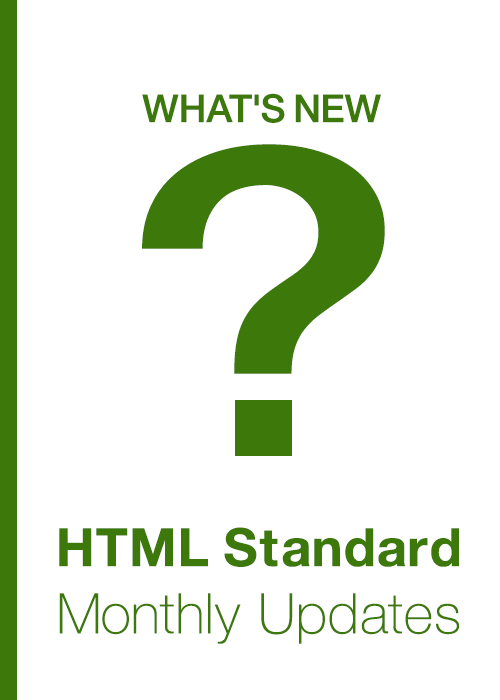
<style>
.page{position:relative;width:500px;height:700px;background:#ffffff}
.page>*{position:absolute;margin:0}
.t1{font:38.7px "HelveticaNeue-Medium";color:#3c790a}
.t2{font:426.9px "HelveticaNeue-Medium";color:#3c790a;scale:1.24 1}
.t3{font:56.1px "HelveticaNeue-Thin";color:#3c790a}
.t4{font:52.6px "HelveticaNeue-Bold";color:#3c790a}
</style>
<div class="page">
<p class="t1" style="left:142px;top:93px;width:239px;height:30px">WHAT'S NEW</p>
<p class="t2" style="left:142px;top:144px;width:243px;height:313px">?</p>
<p class="t3" style="left:59px;top:527px;width:401px;height:117px;text-align:center"><span class="t4">HTML Standard<br></span>Monthly Updates</p>
</div>
